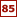
<style>
.page{position:relative;width:17px;height:17px;background:#ffffff}
.page>*{position:absolute;margin:0}
.t1{font:10px "Verdana-Bold";letter-spacing:-0.05em;color:#9c1006;font-variant:small-caps}
</style>
<div class="page">
<p class="t1" style="left:2px;top:4px;width:13px;height:9px">85</p>
</div>
